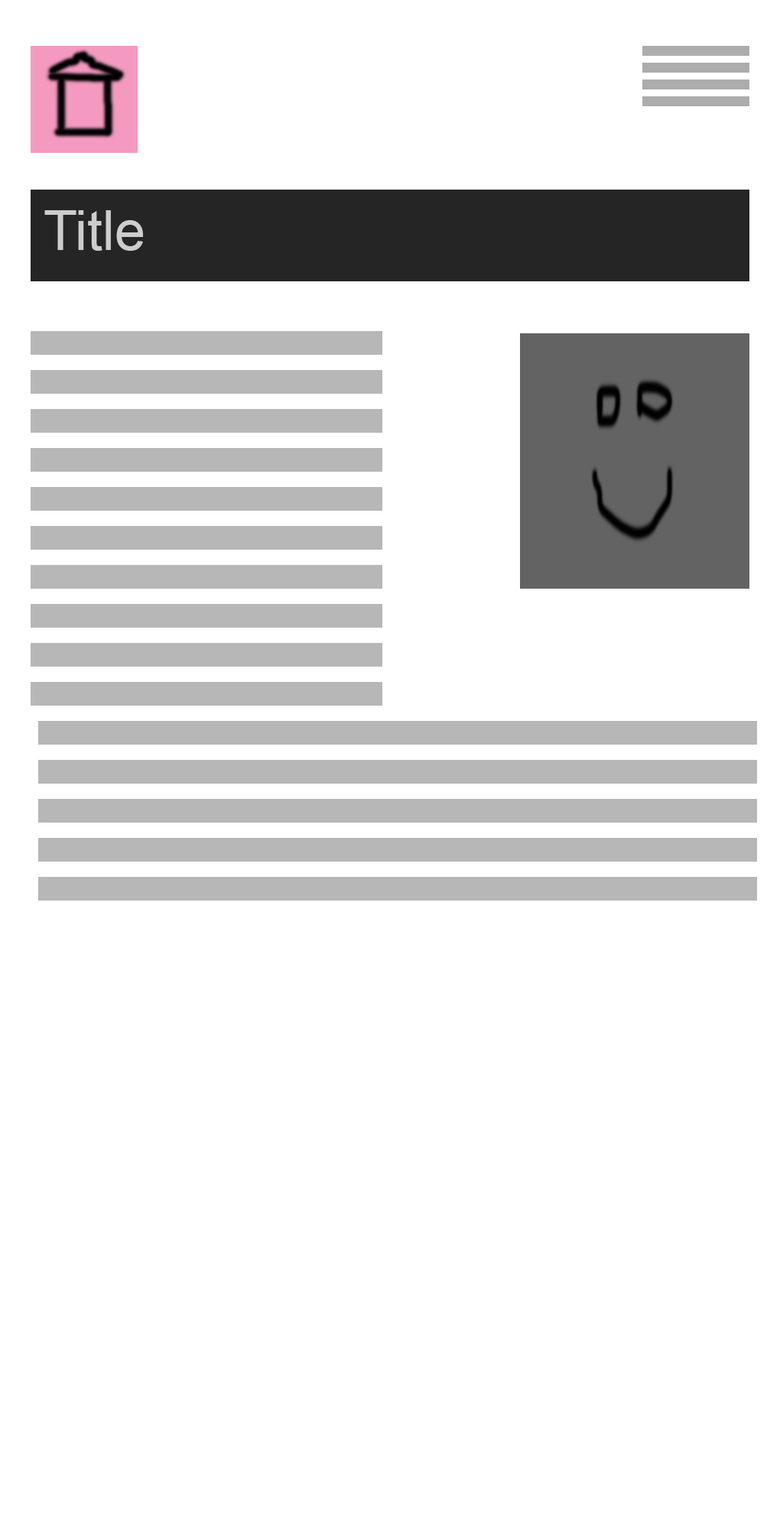
<style>
.page{position:relative;width:780px;height:1529px;background:#ffffff}
.page>*{position:absolute;margin:0}
.t1{font:55px "ArialMT";color:#cdcdcd}
</style>
<div class="page">
<p class="t1" style="left:44px;top:210px;width:100px;height:41px">Title</p>
</div>
